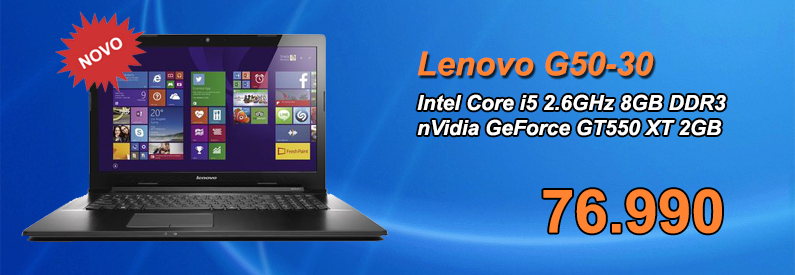
<style>
.page{position:relative;width:795px;height:275px}
.page>*{position:absolute;margin:0}
.t1{font:32.9px "Arial-BoldItalicMT";color:#ff8330}
.t2{font:20.8px "Arial-BoldItalicMT";color:#ffffff}
.t3{font:59.9px "Arial-BoldMT";color:#ff8330}
</style>
<div class="page">
<p class="t1" style="left:417px;top:51px;width:237px;height:25px">Lenovo G50-30</p>
<p class="t2" style="left:417px;top:94px;width:309px;height:42px">Intel Core i5 2.6GHz 8GB DDR3<br>nVidia GeForce GT550 XT 2GB</p>
<p class="t3" style="left:543px;top:189px;width:179px;height:45px">76.990</p>
</div>
